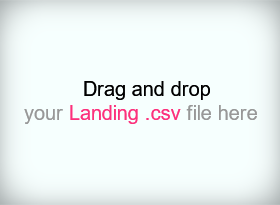
<style>
.page{position:relative;width:280px;height:205px;background:#f6fffe}
.page>*{position:absolute;margin:0}
.t1{font:20px "ArialMT";color:#000000}
.t2{font:20px "ArialMT";color:#989898}
.t3{font:20px "ArialMT";color:#fc317c}
</style>
<div class="page">
<p class="t1" style="left:24px;top:81px;width:233px;height:43px;text-align:center">Drag and drop<br><span class="t2">your </span><span class="t3">Landing .csv</span><span class="t2"> file here</span></p>
</div>
